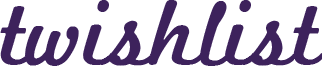
<style>
.page{position:relative;width:322px;height:66px;background:#ffffff}
.page>*{position:absolute;margin:0}
.t1{font:98px "MarketingScript";color:#3d225c}
</style>
<div class="page">
<p class="t1" style="left:0px;top:0px;width:323px;height:66px">twishlist</p>
</div>
